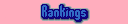
<style>
.page{position:relative;width:128px;height:24px;background:#ffadbd}
.page>*{position:absolute;margin:0}
.t1{font:16.7px "JupiterCrashBRK";color:#316bc5}
</style>
<div class="page">
<p class="t1" style="left:42px;top:5px;width:44px;height:15px">Rankings</p>
</div>
